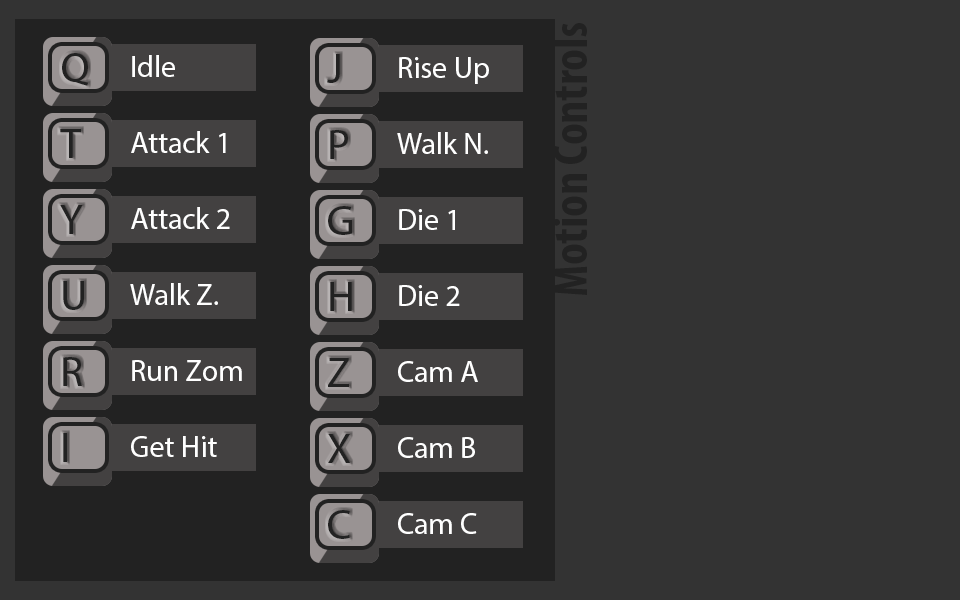
<style>
.page{position:relative;width:960px;height:600px;background:#333333}
.page>*{position:absolute;margin:0}
.t1{font:50px "MyriadPro-BoldCond";color:#222222}
.t2{font:42.6px "MyriadPro-Regular";color:#222222}
.t3{font:30px "MyriadPro-Regular";color:#ffffff}
</style>
<div class="page">
<p class="t1" style="left:553px;top:23px;width:34px;height:272px;rotate:-90deg">Motion Controls</p>
<p class="t2" style="left:62px;top:53px;width:27px;height:33px">Q</p>
<p class="t2" style="left:327px;top:54px;width:13px;height:29px">J</p>
<p class="t3" style="left:132px;top:55px;width:43px;height:22px">Idle</p>
<p class="t3" style="left:399px;top:57px;width:90px;height:27px">Rise Up</p>
<p class="t2" style="left:60px;top:129px;width:21px;height:29px">T</p>
<p class="t3" style="left:131px;top:131px;width:95px;height:22px">Attack 1</p>
<p class="t2" style="left:330px;top:130px;width:18px;height:29px">P</p>
<p class="t3" style="left:397px;top:132px;width:91px;height:22px">Walk N.</p>
<p class="t2" style="left:60px;top:205px;width:23px;height:29px">Y</p>
<p class="t3" style="left:131px;top:207px;width:99px;height:22px">Attack 2</p>
<p class="t2" style="left:328px;top:206px;width:24px;height:29px">G</p>
<p class="t3" style="left:399px;top:209px;width:56px;height:21px">Die 1</p>
<p class="t2" style="left:63px;top:281px;width:21px;height:29px">U</p>
<p class="t3" style="left:130px;top:283px;width:88px;height:22px">Walk Z.</p>
<p class="t2" style="left:330px;top:282px;width:22px;height:29px">H</p>
<p class="t3" style="left:399px;top:285px;width:61px;height:21px">Die 2</p>
<p class="t2" style="left:63px;top:357px;width:19px;height:29px">R</p>
<p class="t3" style="left:132px;top:360px;width:110px;height:21px">Run Zom</p>
<p class="t2" style="left:328px;top:358px;width:21px;height:29px">Z</p>
<p class="t3" style="left:398px;top:361px;width:80px;height:21px">Cam A</p>
<p class="t2" style="left:63px;top:433px;width:4px;height:29px">I</p>
<p class="t3" style="left:131px;top:436px;width:86px;height:21px">Get Hit</p>
<p class="t2" style="left:328px;top:434px;width:23px;height:29px">X</p>
<p class="t3" style="left:398px;top:437px;width:77px;height:21px">Cam B</p>
<p class="t2" style="left:328px;top:510px;width:22px;height:29px">C</p>
<p class="t3" style="left:398px;top:513px;width:79px;height:21px">Cam C</p>
</div>
